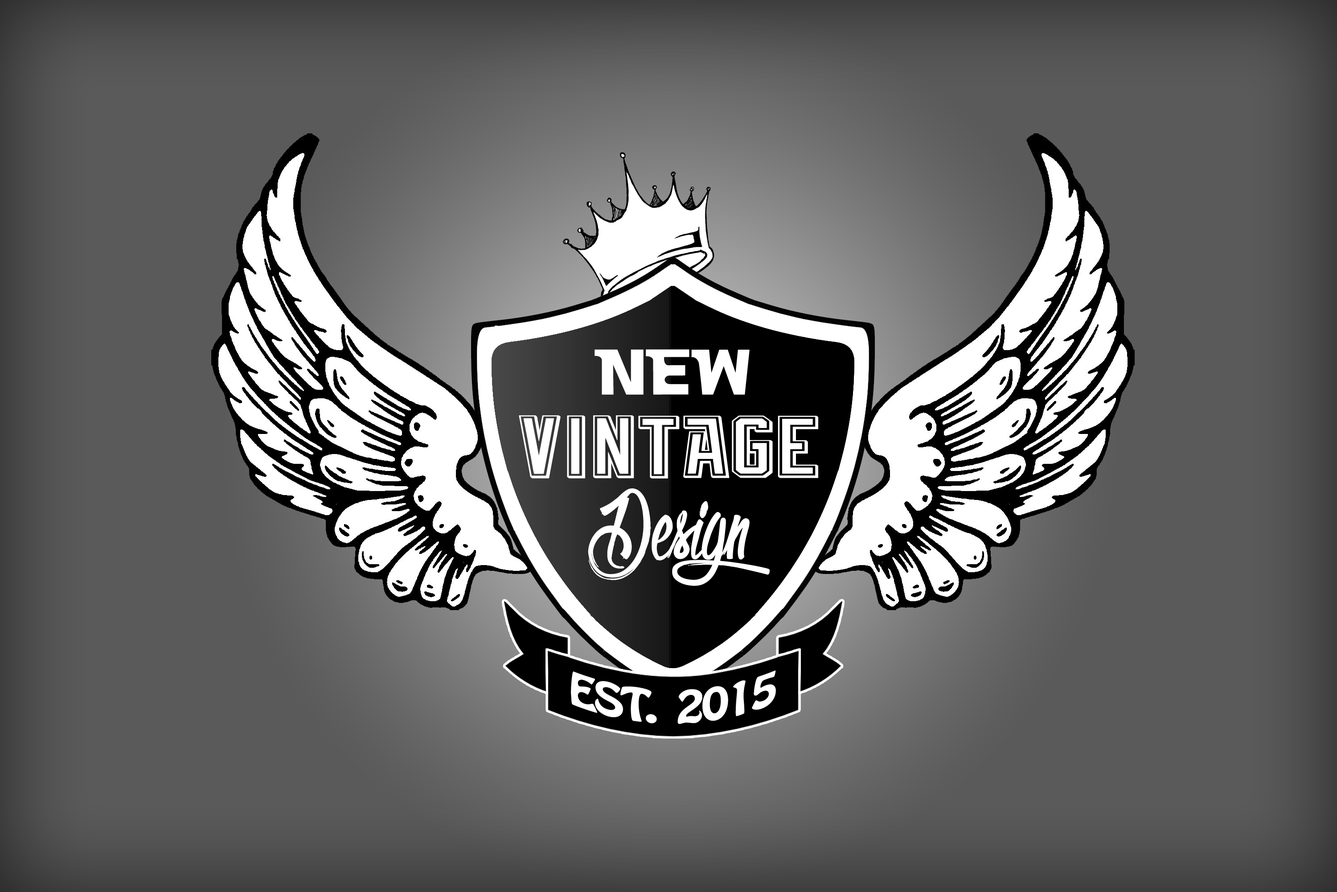
<style>
.page{position:relative;width:1337px;height:892px;background:#5a5a5a}
.page>*{position:absolute;margin:0}
.t1{font:66.9px "Vintage";color:#ffffff}
.t2{font:89.2px "TBL_Vintage";color:#ffffff}
.t3{font:124.8px "OlympicBranding";color:#ffffff}
.t4{font:44.6px "HoboStd";letter-spacing:-0.075em;color:#ffffff}
</style>
<div class="page">
<p class="t1" style="left:595px;top:349px;width:155px;height:46px">NEW</p>
<p class="t2" style="left:519px;top:415px;width:299px;height:63px">VINTAGE</p>
<p class="t3" style="left:588px;top:488px;width:182px;height:98px">Design</p>
<p class="t4" style="left:571px;top:670px;width:205px;height:54px">EST.  2015</p>
</div>
